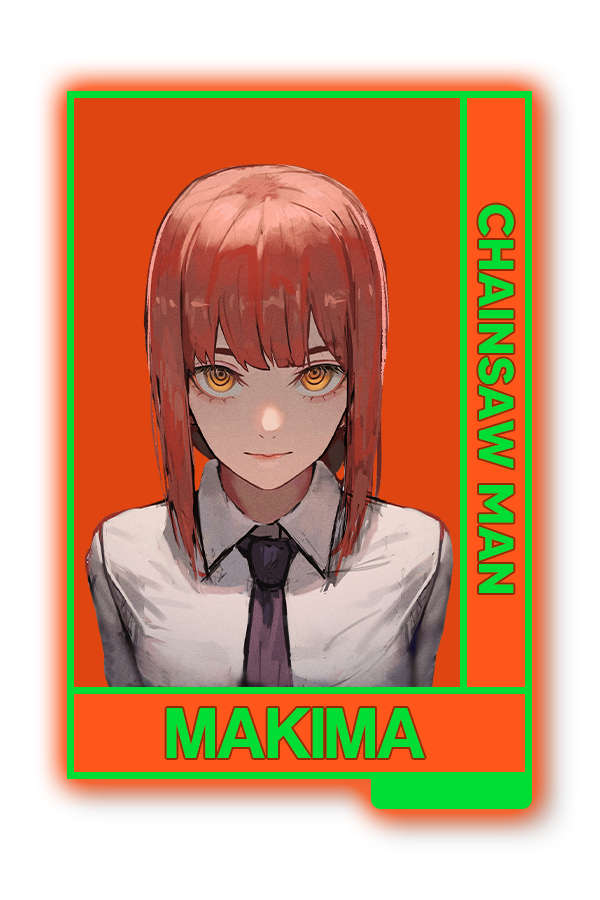
<style>
.page{position:relative;width:600px;height:900px;background:#ffffff}
.page>*{position:absolute;margin:0}
.t1{font:48.8px "MADETOMMY-Bold";color:#00dd35}
.t2{font:75px "CoolveticaRg-Regular";color:#00dd35}
</style>
<div class="page">
<p class="t1" style="left:478px;top:204px;width:36px;height:389px;rotate:90deg">CHAINSAW MAN</p>
<p class="t2" style="left:166px;top:708px;width:259px;height:50px">MAKIMA</p>
</div>
